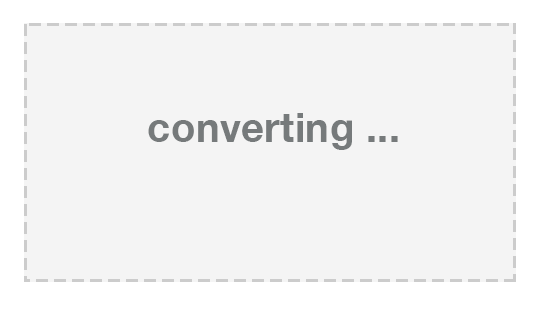
<style>
.page{position:relative;width:542px;height:309px;background:#f4f4f4}
.page>*{position:absolute;margin:0}
.t1{font:40.8px "HelveticaNeue-Bold";letter-spacing:0.01em;color:#767a7b}
</style>
<div class="page">
<p class="t1" style="left:148px;top:113px;width:250px;height:37px">converting ...</p>
</div>
